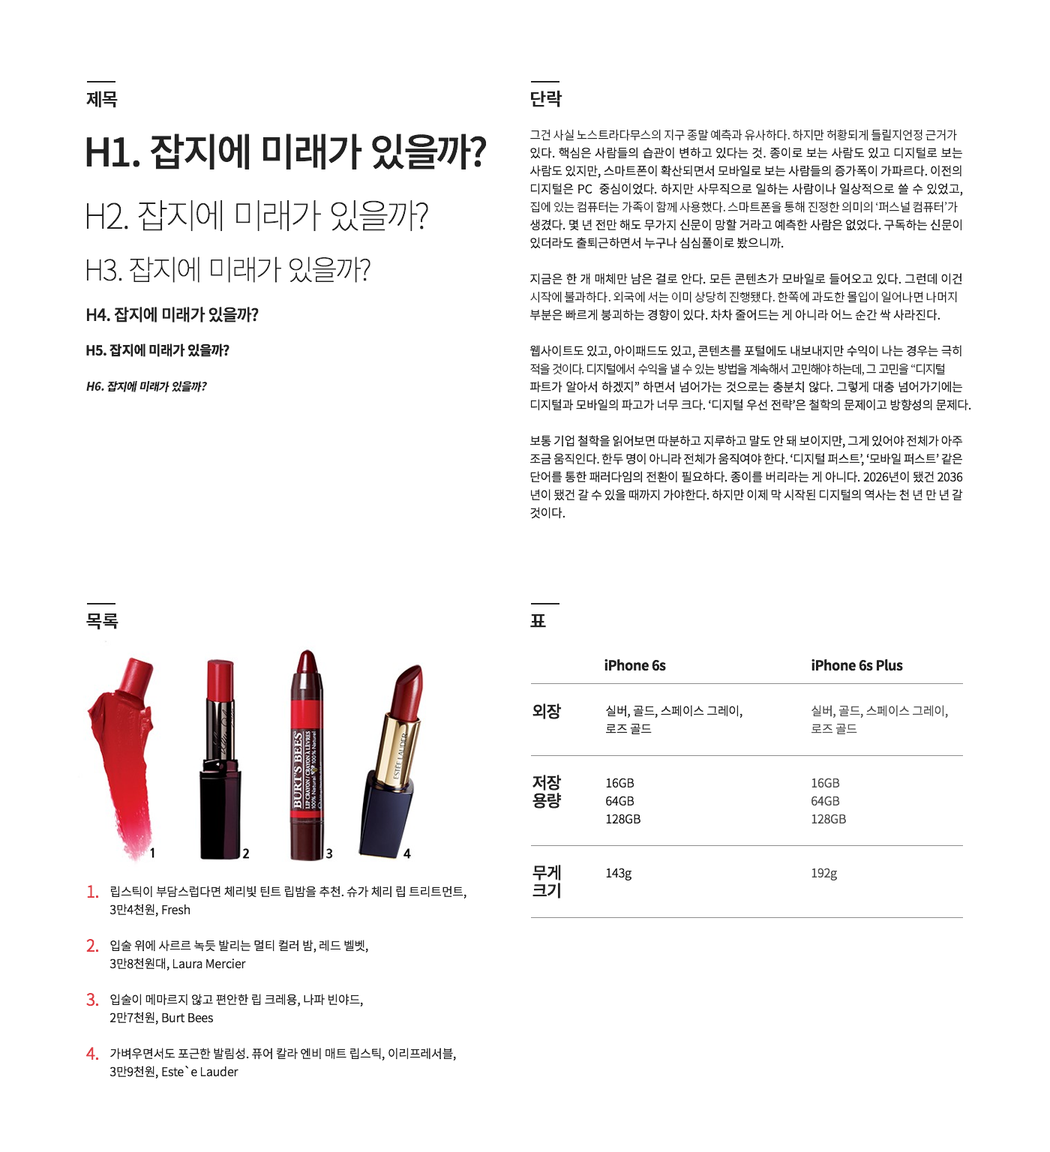
<style>
.page{position:relative;width:1050px;height:1152px;background:#ffffff}
.page>*{position:absolute;margin:0}
.t1{font:18px "SourceHanSansKR-Medium";letter-spacing:-0.04em;color:#222222;font-weight:bold}
.t2{font:9px "AppleGothic";color:#222222}
.t3{font:9px "AppleGothic";color:#505050}
.t4{font:9px/18px "AppleGothic";color:#222222}
.t5{font:16.5px "AppleGothic";color:#e13f46}
</style>
<div class="page">
<p class="t1" style="left:86px;top:91px;width:32px;height:17px">제목</p>
<p class="t1" style="left:531px;top:90px;width:31px;height:17px">단락</p>
<p class="t2" style="left:86px;top:134px;width:401px;height:36px">H1. 잡지에 미래가 있을까?</p>
<p class="t2" style="left:530px;top:129px;width:441px;height:390px;text-align:justify">그건 사실 노스트라다무스의 지구 종말 예측과 유사하다. 하지만 허황되게 들릴지언정 근거가 있다. 핵심은 사람들의 습관이 변하고 있다는 것. 종이로 보는 사람도 있고 디지털로 보는 사람도 있지만, 스마트폰이 확산되면서 모바일로 보는 사람들의 증가폭이 가파르다. 이전의 디지털은 PC  중심이었다. 하지만 사무직으로 일하는 사람이나 일상적으로 쓸 수 있었고, 집에 있는 컴퓨터는 가족이 함께 사용했다. 스마트폰을 통해 진정한 의미의 ‘퍼스널 컴퓨터’가 생겼다. 몇 년 전만 해도 무가지 신문이 망할 거라고 예측한 사람은 없었다. 구독하는 신문이 있더라도 출퇴근하면서 누구나 심심풀이로 봤으니까.<br>지금은 한 개 매체만 남은 걸로 안다. 모든 콘텐츠가 모바일로 들어오고 있다. 그런데 이건 시작에 불과하다. 외국에 서는 이미 상당히 진행됐다. 한쪽에 과도한 몰입이 일어나면 나머지 부분은 빠르게 붕괴하는 경향이 있다. 차차 줄어드는 게 아니라 어느 순간 싹 사라진다.  <br>웹사이트도 있고, 아이패드도 있고, 콘텐츠를 포털에도 내보내지만 수익이 나는 경우는 극히 적을 것이다. 디지털에서 수익을 낼 수 있는 방법을 계속해서 고민해야 하는데, 그 고민을 “디지털 파트가 알아서 하겠지” 하면서 넘어가는 것으로는 충분치 않다. 그렇게 대충 넘어가기에는 디지털과 모바일의 파고가 너무 크다. ‘디지털 우선 전략’은 철학의 문제이고 방향성의 문제다. <br>보통 기업 철학을 읽어보면 따분하고 지루하고 말도 안 돼 보이지만, 그게 있어야 전체가 아주 조금 움직인다. 한두 명이 아니라 전체가 움직여야 한다. ‘디지털 퍼스트’, ‘모바일 퍼스트’ 같은 단어를 통한 패러다임의 전환이 필요하다. 종이를 버리라는 게 아니다. 2026년이 됐건 2036년이 됐건 갈 수 있을 때까지 가야한다. 하지만 이제 막 시작된 디지털의 역사는 천 년 만 년 갈 것이다.</p>
<p class="t2" style="left:86px;top:200px;width:342px;height:32px">H2. 잡지에 미래가 있을까?</p>
<p class="t2" style="left:86px;top:256px;width:284px;height:27px">H3. 잡지에 미래가 있을까?</p>
<p class="t2" style="left:86px;top:307px;width:173px;height:15px">H4. 잡지에 미래가 있을까?</p>
<p class="t2" style="left:86px;top:344px;width:144px;height:13px">H5. 잡지에 미래가 있을까?</p>
<p class="t2" style="left:86px;top:381px;width:121px;height:11px">H6. 잡지에 미래가 있을까?</p>
<p class="t1" style="left:86px;top:614px;width:32px;height:16px">목록</p>
<p class="t1" style="left:530px;top:614px;width:16px;height:14px">표</p>
<p class="t2" style="left:604px;top:658px;width:62px;height:13px">iPhone 6s</p>
<p class="t2" style="left:812px;top:658px;width:91px;height:13px">iPhone 6s Plus</p>
<p class="t2" style="left:532px;top:704px;width:30px;height:15px">외장</p>
<p class="t2" style="left:606px;top:705px;width:136px;height:175px">실버, 골드, 스페이스 그레이, <br>로즈 골드<br>16GB<br>64GB<br>128GB<br>143g</p>
<p class="t3" style="left:812px;top:705px;width:136px;height:175px">실버, 골드, 스페이스 그레이, <br>로즈 골드<br>16GB<br>64GB<br>128GB<br>192g</p>
<p class="t4" style="left:532px;top:775px;width:30px;height:33px">저장<br>용량</p>
<p class="t4" style="left:532px;top:865px;width:29px;height:33px">무게<br>크기</p>
<p class="t5" style="left:86px;top:885px;width:13px;height:175px">1.<br>2.<br>3.<br>4.</p>
<p class="t2" style="left:110px;top:886px;width:356px;height:192px">립스틱이 부담스럽다면 체리빛 틴트 립밤을 추천. 슈가 체리 립 트리트먼트, <br>3만4천원, Fresh<br>입술 위에 사르르 녹듯 발리는 멀티 컬러 밤, 레드 벨벳, <br>3만8천원대, Laura Mercier<br>입술이 메마르지 않고 편안한 립 크레용, 나파 빈야드, <br>2만7천원, Burt Bees<br>가벼우면서도 포근한 발림성. 퓨어 칼라 엔비 매트 립스틱, 이리프레서블,<br>3만9천원, Este`e Lauder</p>
</div>
